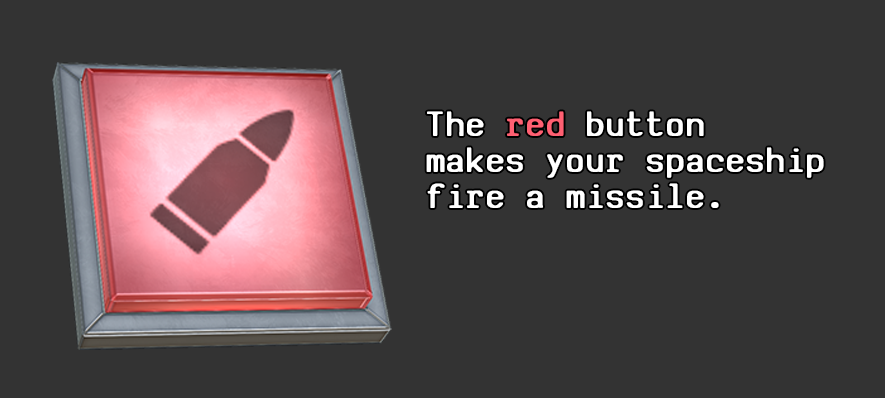
<style>
.page{position:relative;width:885px;height:398px;background:#333333}
.page>*{position:absolute;margin:0}
.t1{font:37.8px/36px "SVBasicManual-Bold";letter-spacing:0.05em;color:#ffffff;scale:0.95 1}
.t2{font:37.8px/36px "SVBasicManual-Bold";letter-spacing:0.05em;color:#ff6072;scale:0.95 1}
</style>
<div class="page">
<p class="t1" style="left:426px;top:111px;width:398px;height:97px">The <span class="t2">red </span>button <br>makes your spaceship <br>fire a missile.</p>
</div>
